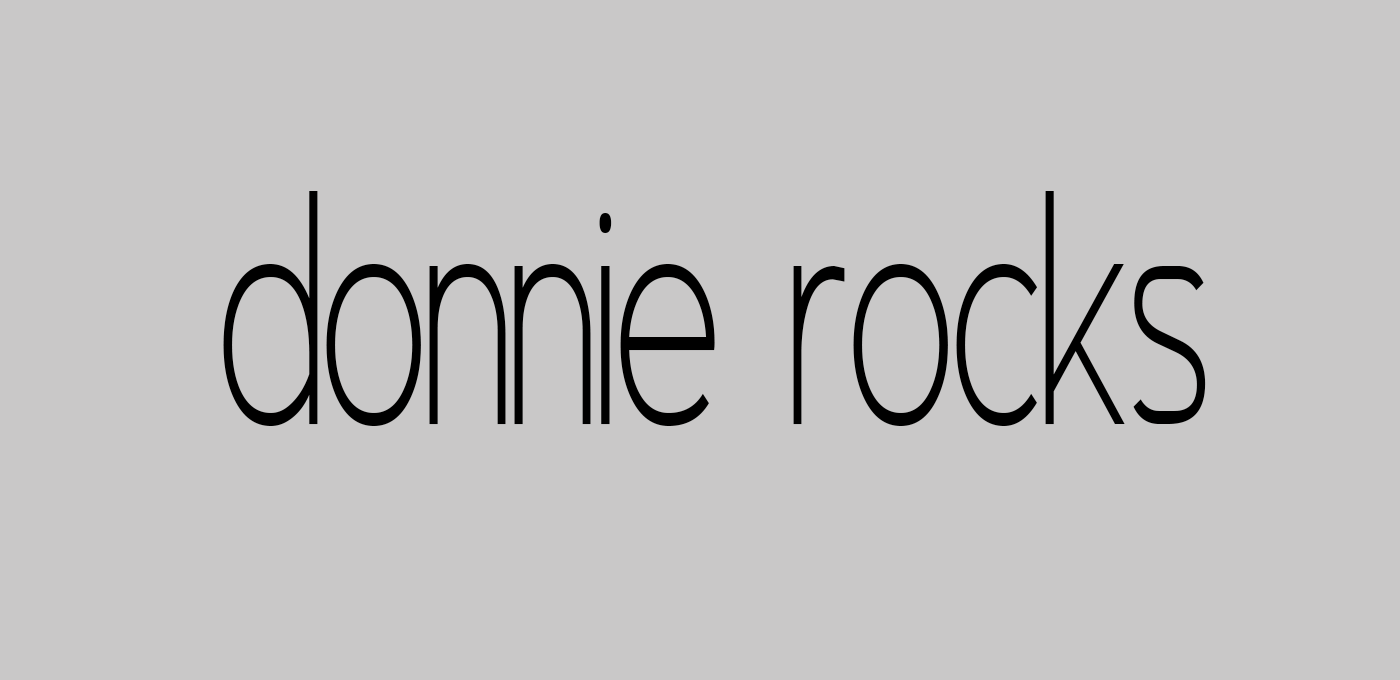
<style>
.page{position:relative;width:1400px;height:680px;background:#c9c8c8}
.page>*{position:absolute;margin:0}
.t1{font:400px "AsenineSuperThin";color:#000000}
</style>
<div class="page">
<p class="t1" style="left:223px;top:191px;width:983px;height:235px">donnie rocks</p>
</div>
